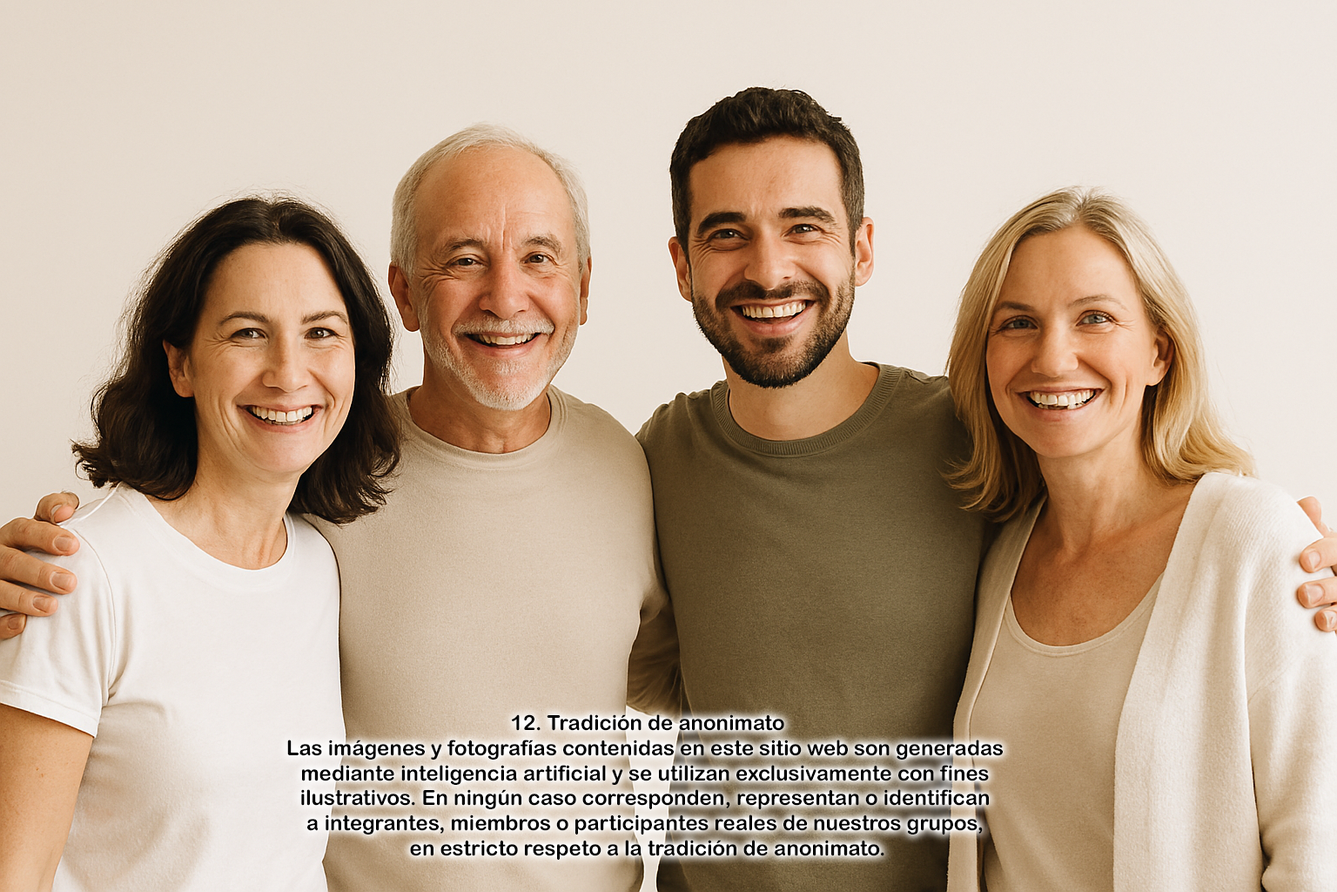
<style>
.page{position:relative;width:1337px;height:892px}
.page>*{position:absolute;margin:0}
.t1{font:20.9px "ArialRoundedMTBold";color:#000000}
</style>
<div class="page">
<p class="t1" style="left:287px;top:714px;width:716px;height:145px;text-align:center">12. Tradición de anonimato<br>Las imágenes y fotografías contenidas en este sitio web son generadas <br>mediante inteligencia artificial y se utilizan exclusivamente con fines <br>ilustrativos. En ningún caso corresponden, representan o identifican <br>a integrantes, miembros o participantes reales de nuestros grupos, <br>en estricto respeto a la tradición de anonimato.</p>
</div>
